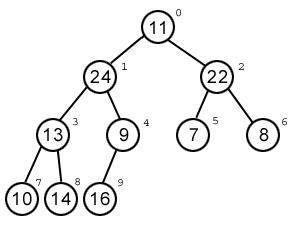
<style>
.page{position:relative;width:293px;height:226px;background:#ffffff}
.page>*{position:absolute;margin:0}
.t1{font:12px "Courier";letter-spacing:0.075em}
.t2{font:18px "ArialMT";letter-spacing:0.075em;color:#000000}
.t3{font:12px "Courier";letter-spacing:0.075em;color:#000000}
</style>
<div class="page">
<p class="t1" style="left:176px;top:9px;width:5px;height:8px">0</p>
<p class="t2" style="left:150px;top:21px;width:15px;height:13px">11</p>
<p class="t1" style="left:122px;top:63px;width:5px;height:7px">1</p>
<p class="t3" style="left:238px;top:63px;width:6px;height:7px">2</p>
<p class="t2" style="left:90px;top:70px;width:21px;height:13px">24</p>
<p class="t2" style="left:207px;top:70px;width:21px;height:13px">22</p>
<p class="t1" style="left:73px;top:118px;width:5px;height:8px">3</p>
<p class="t3" style="left:143px;top:119px;width:6px;height:7px">4</p>
<p class="t1" style="left:213px;top:117px;width:5px;height:8px">5</p>
<p class="t1" style="left:282px;top:118px;width:5px;height:8px">6</p>
<p class="t2" style="left:44px;top:128px;width:19px;height:14px">13</p>
<p class="t2" style="left:119px;top:128px;width:10px;height:14px">9</p>
<p class="t2" style="left:189px;top:128px;width:9px;height:13px">7</p>
<p class="t2" style="left:259px;top:128px;width:10px;height:14px">8</p>
<p class="t1" style="left:36px;top:179px;width:5px;height:7px">7</p>
<p class="t1" style="left:75px;top:178px;width:5px;height:8px">8</p>
<p class="t1" style="left:118px;top:179px;width:5px;height:8px">9</p>
<p class="t2" style="left:13px;top:192px;width:19px;height:14px">10</p>
<p class="t2" style="left:52px;top:192px;width:19px;height:13px">14</p>
<p class="t2" style="left:91px;top:192px;width:19px;height:14px">16</p>
</div>
